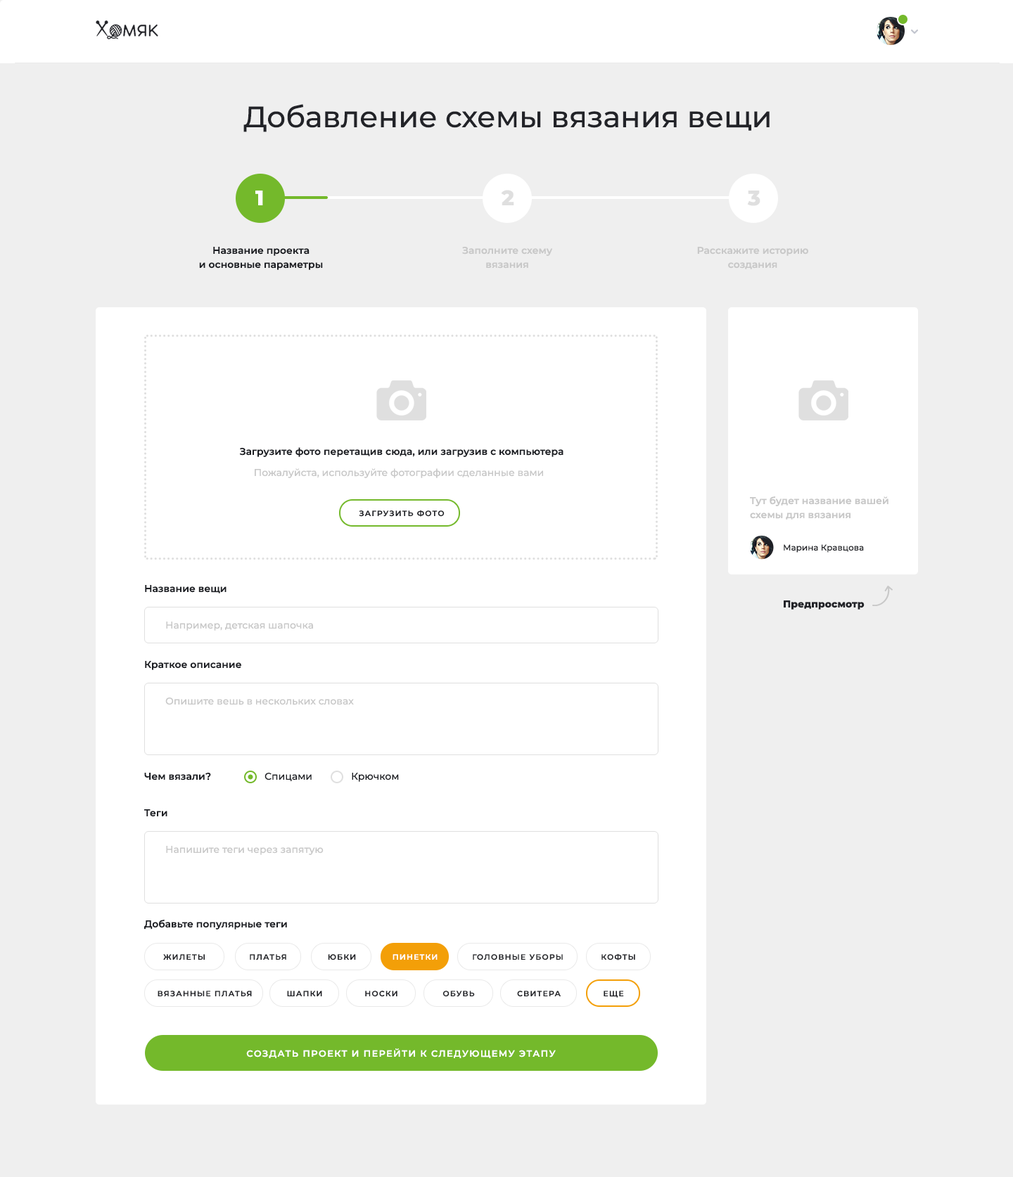
<style>
.page{position:relative;width:1013px;height:1177px;background:#ffffff}
.page>*{position:absolute;margin:0}
.t1{font:29.5px "Montserrat-Medium";color:#222328}
.t2{font:21.1px "Montserrat-ExtraBold";color:#ffffff}
.t3{font:21.1px "Montserrat-ExtraBold";color:#dfdfdf}
.t4{font:9.8px/14.1px "Montserrat-SemiBold";color:#1c1e23}
.t5{font:9.8px/14.1px "Montserrat-SemiBold";color:#c8c8c8}
.t6{font:9.8px "Montserrat-SemiBold";color:#1c1e23}
.t7{font:9.8px "Montserrat-Medium";color:#c8c8c8}
.t8{font:7.7px "Montserrat-SemiBold";letter-spacing:0.1em;color:#1c1e23;text-transform:uppercase}
.t9{font:8.4px "Montserrat-Medium";color:#222328}
.t10{font:9.8px "Montserrat-ExtraBold";color:#222328}
.t11{font:9.8px "Montserrat-Medium";color:#1c1e23}
.t12{font:7.7px "Montserrat-SemiBold";letter-spacing:0.1em;color:#222328;text-transform:uppercase}
.t13{font:7.7px "Montserrat-SemiBold";letter-spacing:0.1em;color:#ffffff;text-transform:uppercase}
.t14{font:9.1px "Montserrat-SemiBold";letter-spacing:0.1em;color:#ffffff;text-transform:uppercase}
</style>
<div class="page">
<p class="t1" style="left:243px;top:104px;width:526px;height:28px">Добавление схемы вязания вещи</p>
<p class="t2" style="left:255px;top:191px;width:8px;height:14px">1</p>
<p class="t3" style="left:501px;top:190px;width:13px;height:15px">2</p>
<p class="t3" style="left:747px;top:191px;width:13px;height:15px">3</p>
<p class="t4" style="left:199px;top:247px;width:124px;height:23px;text-align:center">Название проекта<br>и основные параметры</p>
<p class="t5" style="left:462px;top:247px;width:91px;height:22px;text-align:center">Заполните схему<br>вязания</p>
<p class="t5" style="left:697px;top:247px;width:111px;height:22px;text-align:center">Расскажите историю<br>создания</p>
<p class="t6" style="left:239px;top:447px;width:324px;height:10px">Загрузите фото перетащив сюда, или загрузив с компьютера</p>
<p class="t7" style="left:255px;top:468px;width:288px;height:10px">Пожалуйста, используйте фотографии сделанные вами</p>
<p class="t5" style="left:750px;top:497px;width:138px;height:23px">Тут будет название вашей<br>схемы для вязания</p>
<p class="t8" style="left:359px;top:510px;width:86px;height:7px">Загрузить фото</p>
<p class="t9" style="left:784px;top:544px;width:80px;height:9px">Марина Кравцова</p>
<p class="t6" style="left:145px;top:585px;width:81px;height:9px">Название вещи</p>
<p class="t10" style="left:784px;top:601px;width:80px;height:9px">Предпросмотр</p>
<p class="t7" style="left:166px;top:622px;width:147px;height:9px">Например, детская шапочка</p>
<p class="t6" style="left:145px;top:661px;width:96px;height:9px">Краткое описание</p>
<p class="t7" style="left:165px;top:698px;width:189px;height:7px">Опишите вешь в нескольких словах</p>
<p class="t6" style="left:144px;top:773px;width:67px;height:8px">Чем вязали?</p>
<p class="t11" style="left:264px;top:773px;width:48px;height:8px">Спицами</p>
<p class="t11" style="left:352px;top:773px;width:47px;height:9px">Крючком</p>
<p class="t6" style="left:144px;top:810px;width:23px;height:7px">Теги</p>
<p class="t7" style="left:166px;top:846px;width:158px;height:9px">Напишите теги через запятую</p>
<p class="t6" style="left:144px;top:920px;width:143px;height:10px">Добавьте популярные теги</p>
<p class="t12" style="left:601px;top:954px;width:34px;height:7px">кофты</p>
<p class="t12" style="left:163px;top:954px;width:42px;height:7px">Жилеты</p>
<p class="t12" style="left:250px;top:954px;width:36px;height:7px">Платья</p>
<p class="t12" style="left:328px;top:954px;width:28px;height:7px">юбки</p>
<p class="t13" style="left:392px;top:954px;width:45px;height:6px">пинетки</p>
<p class="t12" style="left:473px;top:954px;width:90px;height:7px">Головные уборы</p>
<p class="t12" style="left:158px;top:991px;width:94px;height:6px">вязанные платья</p>
<p class="t12" style="left:287px;top:991px;width:35px;height:6px">шапки</p>
<p class="t12" style="left:365px;top:991px;width:32px;height:6px">Носки</p>
<p class="t12" style="left:442px;top:991px;width:33px;height:6px">обувь</p>
<p class="t12" style="left:517px;top:991px;width:44px;height:6px">свитера</p>
<p class="t12" style="left:603px;top:991px;width:21px;height:7px">еще</p>
<p class="t14" style="left:246px;top:1049px;width:310px;height:10px">Создать проект и перейти к следующему этапу</p>
</div>
